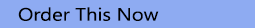
<style>
.page{position:relative;width:255px;height:28px;background:#8eabf2}
.page>*{position:absolute;margin:0}
.t1{font:18px "LaoUI";color:#010101;scale:1.13 1}
</style>
<div class="page">
<p class="t1" style="left:18px;top:7px;width:141px;height:14px">Order This Now</p>
</div>
